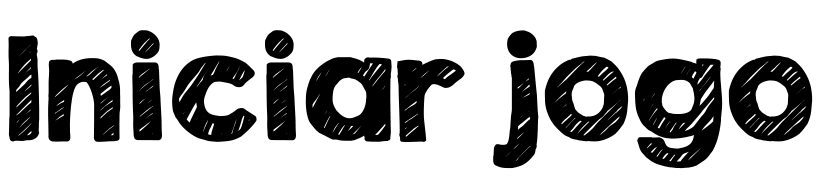
<style>
.page{position:relative;width:817px;height:184px;background:#ffffff}
.page>*{position:absolute;margin:0}
.t1{font:125px "KGSecondChancesSketch";color:#000000;font-weight:bold}
</style>
<div class="page">
<p class="t1" style="left:8px;top:30px;width:805px;height:139px">Iniciar jogo</p>
</div>
